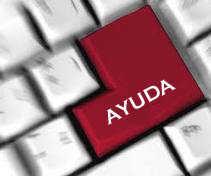
<style>
.page{position:relative;width:211px;height:176px}
.page>*{position:absolute;margin:0}
.t1{font:20px "CopperplateGothic-Bold";color:#fefeff}
</style>
<div class="page">
<p class="t1" style="left:106px;top:79px;width:70px;height:46px;rotate:-29deg">AYUDA</p>
</div>
